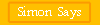
<style>
.page{position:relative;width:100px;height:25px;background:#ffc000}
.page>*{position:absolute;margin:0}
.t1{font:13.9px "FootlightMTLight";color:#ffffff}
</style>
<div class="page">
<p class="t1" style="left:18px;top:6px;width:63px;height:13px">Simon Says</p>
</div>
